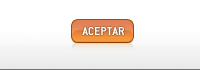
<style>
.page{position:relative;width:200px;height:70px;background:#ffffff}
.page>*{position:absolute;margin:0}
.t1{font:12.5px "ConduitITC-Bold";letter-spacing:0.02em;color:#ffffff;text-transform:uppercase}
</style>
<div class="page">
<p class="t1" style="left:82px;top:27px;width:43px;height:8px">aceptar</p>
</div>
